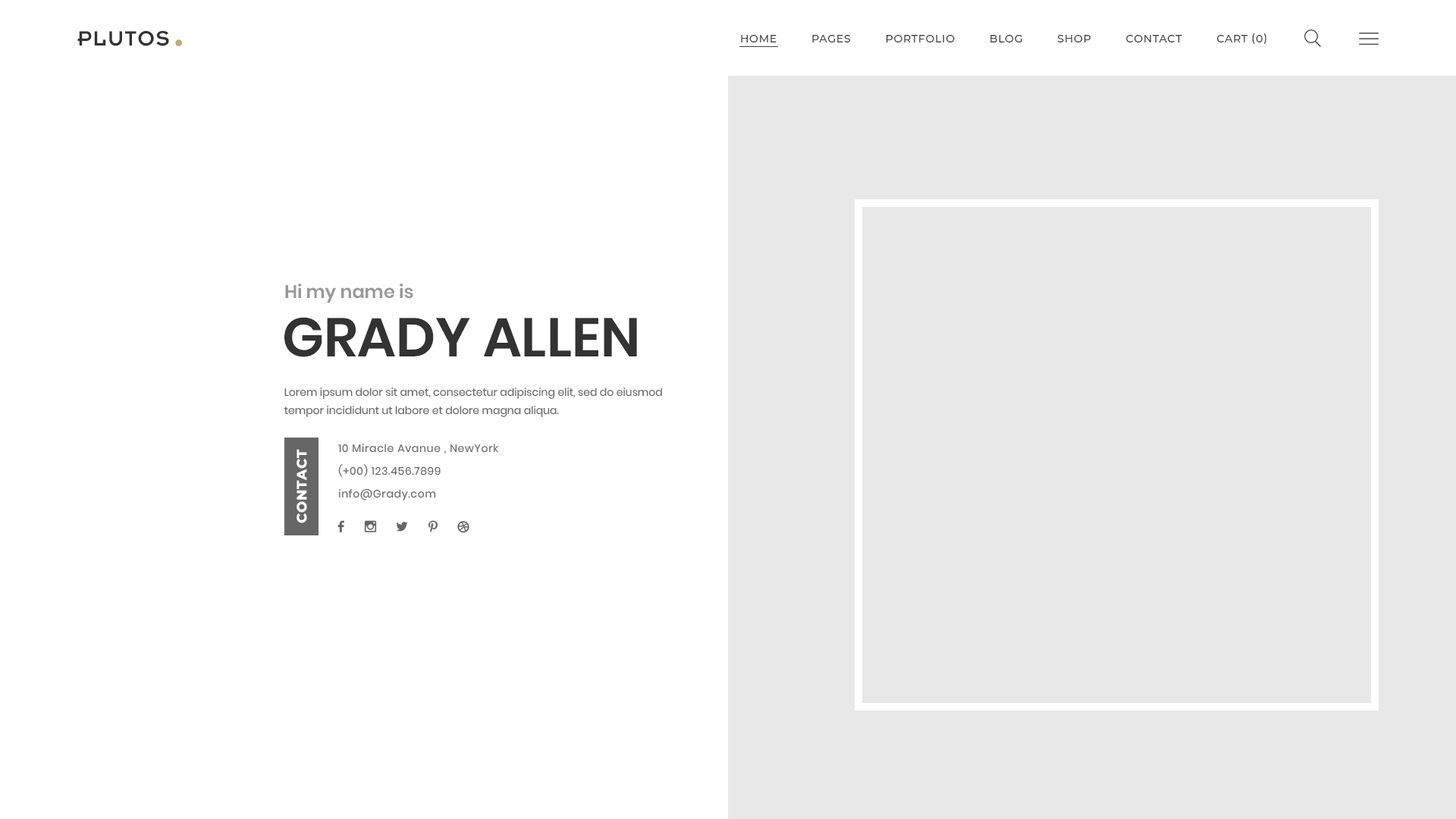
<style>
.page{position:relative;width:1456px;height:819px;background:#ffffff}
.page>*{position:absolute;margin:0}
.t1{font:22.7px "Insignia";letter-spacing:0.05em;color:#333333;text-transform:uppercase}
.t2{font:54.6px "Insignia";letter-spacing:0.05em;color:#c3ac6d;text-transform:uppercase}
.t3{font:10.7px "Montserrat-Medium";letter-spacing:0.05em;color:#444444;text-transform:uppercase}
.t4{font:18.2px "Poppins-SemiBold";color:#999999}
.t5{font:54.6px "Poppins-SemiBold";color:#333333;text-transform:uppercase}
.t6{font:10.6px/18.2px "Poppins-Regular";color:#666666}
.t7{font:13.6px "Montserrat-ExtraBold";letter-spacing:0.05em;color:#ffffff;text-transform:uppercase}
.t8{font:10.6px/22.7px "Poppins-Regular";letter-spacing:0.05em;color:#666666}
</style>
<div class="page">
<p class="t1" style="left:77px;top:30px;width:92px;height:16px">Plutos</p>
<p class="t2" style="left:175px;top:39px;width:7px;height:7px">.</p>
<p class="t3" style="left:741px;top:33px;width:525px;height:11px">Home          pages          portfolio          blog          shop          contact          cart (0)</p>
<p class="t4" style="left:285px;top:284px;width:128px;height:19px">Hi my name is</p>
<p class="t5" style="left:284px;top:317px;width:353px;height:40px">Grady Allen</p>
<p class="t6" style="left:284px;top:388px;width:378px;height:29px">Lorem ipsum dolor sit amet, consectetur adipiscing elit, sed do eiusmod tempor incididunt ut labore et dolore magna aliqua.</p>
<p class="t7" style="left:297px;top:449px;width:10px;height:74px;rotate:-90deg">Contact</p>
<p class="t8" style="left:338px;top:444px;width:160px;height:56px">10 Miracle Avanue , NewYork<br>(+00) 123.456.7899<br>info@Grady.com</p>
</div>
